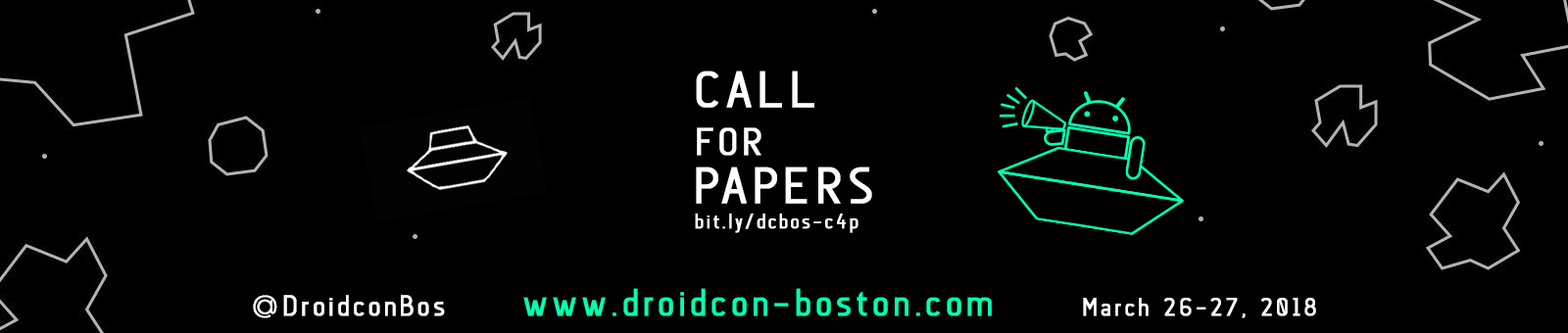
<style>
.page{position:relative;width:1568px;height:333px;background:#000000}
.page>*{position:absolute;margin:0}
.t1{font:20.8px/25.8px "Anson-Regular";letter-spacing:0.1em;color:#ffffff;font-weight:bold}
.t2{font:50.5px/48.1px "Anson-Regular";letter-spacing:0.1em;color:#ffffff;font-weight:bold}
.t3{font:38.4px/48.1px "Anson-Regular";letter-spacing:0.1em;color:#ffffff;font-weight:bold}
.t4{font:38px "Anson-Regular";letter-spacing:0.1em;color:#06ffb1;font-weight:bold}
.t5{font:28.9px "Anson-Regular";letter-spacing:0.1em;color:#ffffff;font-weight:bold}
.t6{font:28.9px "NexaLight";letter-spacing:0.1em;color:#ffffff;font-weight:bold}
.t7{font:25.1px "Anson-Regular";letter-spacing:0.1em;color:#ffffff;font-weight:bold}
</style>
<div class="page">
<p class="t1" style="left:695px;top:71px;width:177px;height:162px"><span class="t2">CALL<br></span><span class="t3">FOR<br></span><span class="t2">PAPERS<br></span>bit.ly/dcbos-c4p</p>
<p class="t4" style="left:523px;top:288px;width:469px;height:29px">www.droidcon-boston.com</p>
<p class="t5" style="left:253px;top:295px;width:192px;height:23px"><span class="t6">@</span>DroidconBos</p>
<p class="t7" style="left:1083px;top:298px;width:233px;height:20px">March 26-27, 2018</p>
</div>
